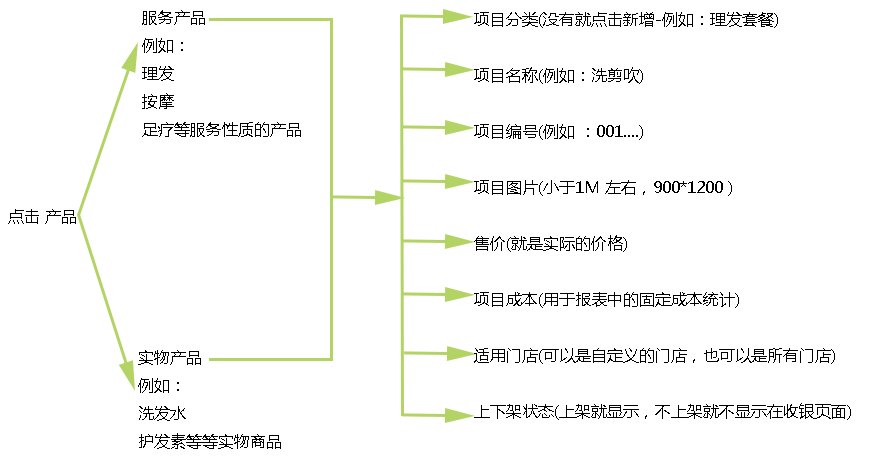
<style>
.page{position:relative;width:878px;height:457px;background:#ffffff}
.page>*{position:absolute;margin:0}
.t1{font:16px "MicrosoftYaHei";color:#000000}
</style>
<div class="page">
<p class="t1" style="left:142px;top:10px;width:159px;height:127px">服务产品<br>例如：<br>理发<br>按摩<br>足疗等服务性质的产品</p>
<p class="t1" style="left:474px;top:12px;width:377px;height:408px">项目分类(没有就点击新增-例如：理发套餐)<br><br>项目名称(例如：洗剪吹)<br><br>项目编号(例如 ：001....)<br><br>项目图片(小于1M 左右，900*1200 )<br><br>售价(就是实际的价格)<br><br>项目成本(用于报表中的固定成本统计)<br><br>适用门店(可以是自定义的门店，也可以是所有门店)<br><br>上下架状态(上架就显示，不上架就不显示在收银页面)</p>
<p class="t1" style="left:8px;top:209px;width:68px;height:15px">点击 产品</p>
<p class="t1" style="left:138px;top:350px;width:143px;height:99px">实物产品<br>例如：<br>洗发水<br>护发素等等实物商品</p>
</div>
